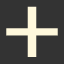
<style>
.page{position:relative;width:64px;height:64px;background:#333333}
.page>*{position:absolute;margin:0}
.t1{font:92px "CalistoMT";color:#fff8dc;font-weight:bold}
</style>
<div class="page">
<p class="t1" style="left:6px;top:6px;width:52px;height:51px">+</p>
</div>
